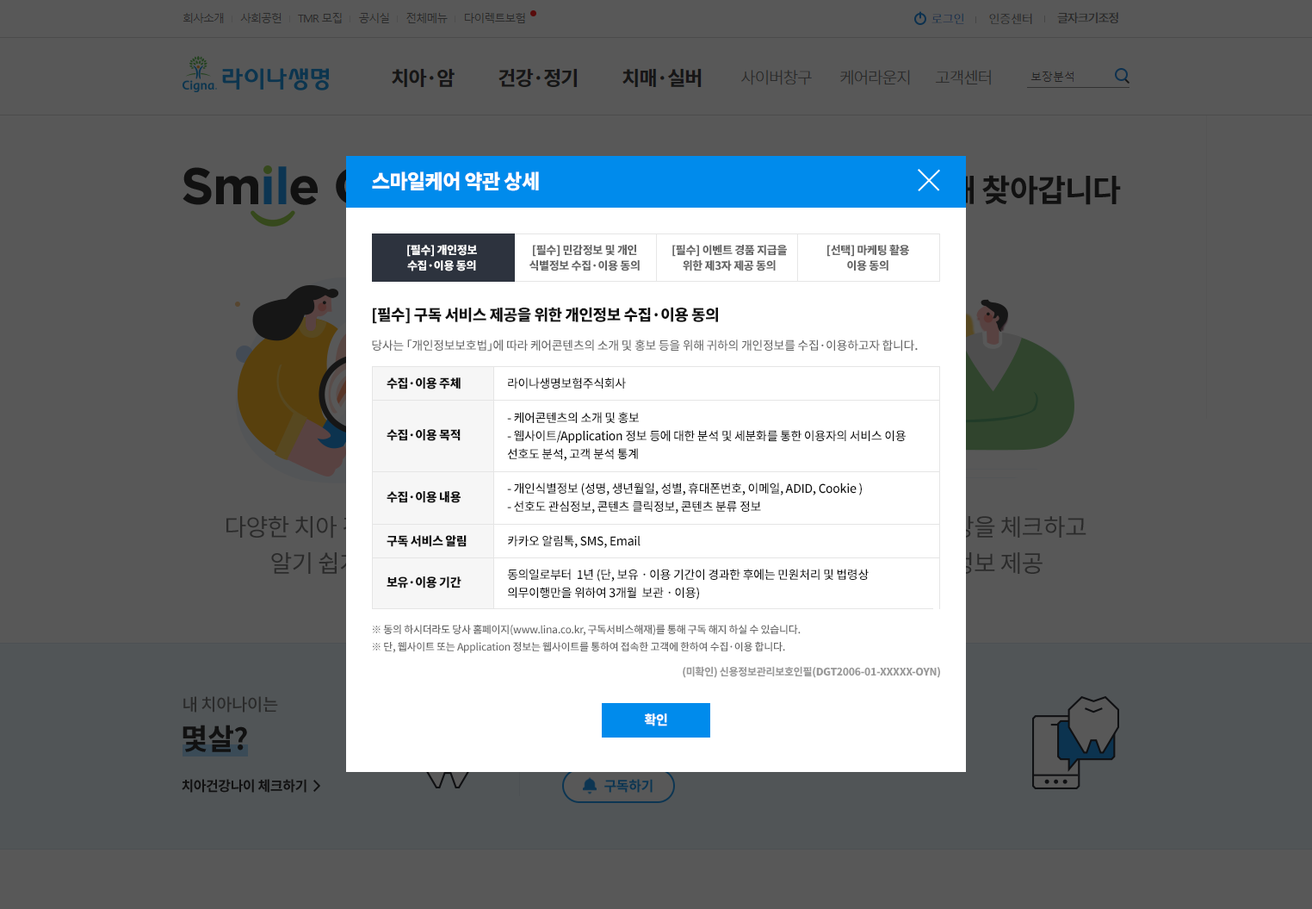
<style>
.page{position:relative;width:1312px;height:909px;background:#585858}
.page>*{position:absolute;margin:0}
.t1{font:19.8px "NotoSansCJKkr-Black";letter-spacing:-0.025em;color:#ffffff}
.t2{font:11.2px/15.5px "NotoSansCJKkr-Black";letter-spacing:-0.025em;color:#ffffff}
.t3{font:11.2px/44.8px "NotoSansCJKkr-Black";letter-spacing:-0.025em;color:#ffffff}
.t4{font:11.2px/15.5px "NotoSansCJKkr-Black";letter-spacing:-0.025em;color:#666666}
.t5{font:15.5px "NotoSansCJKkr-Black";letter-spacing:-0.025em;color:#111111}
.t6{font:12.1px "NotoSansCJKkr-Medium";letter-spacing:-0.025em;color:#666666}
.t7{font:12.1px/43.9px "NotoSansCJKkr-Black";letter-spacing:-0.025em;color:#111111}
.t8{font:12.1px/34.4px "NotoSansCJKkr-Black";letter-spacing:-0.025em;color:#111111}
.t9{font:12.1px/51.7px "NotoSansCJKkr-Black";letter-spacing:-0.025em;color:#111111}
.t10{font:12.1px/62px "NotoSansCJKkr-Black";letter-spacing:-0.025em;color:#111111}
.t11{font:12.1px/41.3px "NotoSansCJKkr-Black";letter-spacing:-0.025em;color:#111111}
.t12{font:12.1px/18.1px "NotoSansCJKkr-Medium";letter-spacing:-0.025em;color:#111111}
.t13{font:12.1px/34.4px "NotoSansCJKkr-Medium";letter-spacing:-0.025em;color:#111111}
.t14{font:12.1px/33.6px "NotoSansCJKkr-Medium";letter-spacing:-0.025em;color:#111111}
.t15{font:10.3px/17.2px "NotoSansCJKkr-Medium";letter-spacing:-0.025em;color:#666666}
.t16{font:10.3px "NotoSansCJKkr-Black";letter-spacing:-0.025em;color:#999999}
.t17{font:12.9px "NotoSansCJKkr-Black";letter-spacing:-0.025em;color:#ffffff}
</style>
<div class="page">
<p class="t1" style="left:372px;top:171px;width:167px;height:20px">스마일케어 약관 상세</p>
<p class="t2" style="left:407px;top:245px;width:70px;height:26px;text-align:center"><span class="t3">[</span>필수] 개인정보<br>수집·이용 동의</p>
<p class="t4" style="left:530px;top:245px;width:110px;height:26px;text-align:center">[필수] 민감정보 및 개인<br>식별정보 수집·이용 동의</p>
<p class="t4" style="left:673px;top:245px;width:114px;height:26px;text-align:center">[필수] 이벤트 경품 지급을<br>위한 제3자 제공 동의</p>
<p class="t4" style="left:828px;top:245px;width:81px;height:26px;text-align:center">[선택] 마케팅 활용<br>이용 동의</p>
<p class="t5" style="left:373px;top:307px;width:345px;height:17px">[필수] 구독 서비스 제공을 위한 개인정보 수집·이용 동의</p>
<p class="t6" style="left:372px;top:339px;width:546px;height:12px">당사는 「개인정보보호법」에 따라 케어콘텐츠의 소개 및 홍보 등을 위해 귀하의 개인정보를 수집·이용하고자 합니다.</p>
<p class="t7" style="left:387px;top:377px;width:80px;height:211px"><span class="t8">수집·이용 주체<br></span><span class="t9">수집·이용 목적<br></span><span class="t10">수집·이용 내용<br></span>구독 서비스 알림<br><span class="t11">보유·이용 기간</span></p>
<p class="t12" style="left:507px;top:377px;width:399px;height:222px"><span class="t13">라이나생명보험주식회사 <br>- 케어콘텐츠의 소개 및 홍보<br></span>- 웹사이트/Application 정보 등에 대한 분석 및 세분화를 통한 이용자의 서비스 이용 <br>선호도 분석, 고객 분석 통계<br><span class="t13">- 개인식별정보 (성명, 생년월일, 성별, 휴대폰번호, 이메일, ADID, Cookie )<br></span>- 선호도 관심정보, 콘텐츠 클릭정보, 콘텐츠 분류 정보<br><span class="t13">카카오 알림톡, SMS, Email<br></span><span class="t14">동의일로부터  1년 (단, 보유ㆍ이용 기간이 경과한 후에는 민원처리 및 법령상 <br></span>의무이행만을 위하여 3개월  보관ㆍ이용)</p>
<p class="t15" style="left:373px;top:624px;width:428px;height:29px">※ 동의 하시더라도 당사 홈페이지(www.lina.co.kr, 구독서비스해재)를 통해 구독 해지 하실 수 있습니다.<br>※ 단, 웹사이트 또는 Application 정보는 웹사이트를 통하여 접속한 고객에 한하여 수집·이용 합니다.</p>
<p class="t16" style="left:683px;top:666px;width:257px;height:12px">(미확인) 신용정보관리보호인필(DGT2006-01-XXXXX-OYN)</p>
<p class="t17" style="left:644px;top:713px;width:23px;height:13px">확인</p>
</div>
